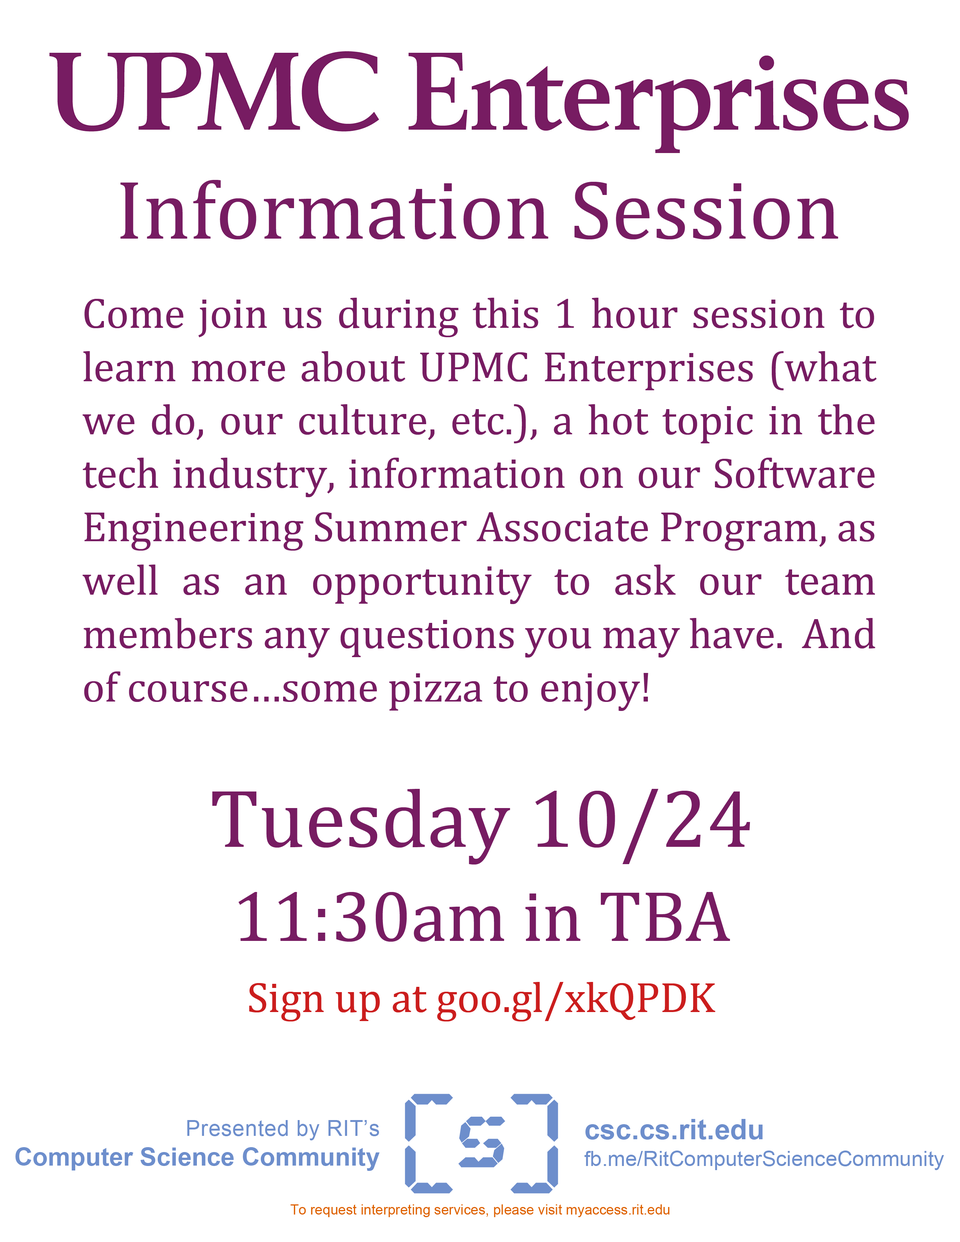
<style>
.page{position:relative;width:960px;height:1242px;background:#ffffff}
.page>*{position:absolute;margin:0}
.t1{font:84.5px "Cambria";color:#771c62}
.t2{font:42.7px/53.4px "Cambria";color:#771c62}
.t3{font:72.2px/94.1px "Cambria";color:#771c62}
.t4{font:83.1px/94.1px "Cambria";color:#771c62}
.t5{font:42.7px "Cambria";color:#cb1d1d}
.t6{font:25.1px/29.8px "Arial-BoldMT";color:#6d8ecc}
.t7{font:22px/29.8px "ArialMT";letter-spacing:0.02em;color:#6d8ecc}
.t8{font:21.2px/26.7px "ArialMT";color:#6d8ecc}
.t9{font:28.2px/26.7px "Arial-BoldMT";color:#6d8ecc}
.t10{font:13.9px "ArialMT";color:#de6100}
</style>
<div class="page">
<p class="t1" style="left:120px;top:180px;width:718px;height:59px">Information Session</p>
<p class="t2" style="left:82px;top:298px;width:795px;height:413px;text-align:justify">Come join us during this 1 hour session to learn more about UPMC Enterprises (what we do, our culture, etc.), a hot topic in the tech industry, information on our Software Engineering Summer Associate Program, as well as an opportunity to ask our team members any questions you may have.  And of course…some pizza to enjoy!</p>
<p class="t3" style="left:212px;top:789px;width:538px;height:153px;text-align:center"><span class="t4">Tuesday 10/24<br></span>11:30am in TBA</p>
<p class="t5" style="left:249px;top:982px;width:466px;height:40px">Sign up at goo.gl/xkQPDK</p>
<p class="t6" style="left:15px;top:1120px;width:365px;height:51px;text-align:right"><span class="t7">Presented by RIT’s<br></span>Computer Science Community</p>
<p class="t8" style="left:584px;top:1119px;width:360px;height:51px"><span class="t9">csc.cs.rit.edu<br></span>fb.me/RitComputerScienceCommunity</p>
<p class="t10" style="left:290px;top:1205px;width:379px;height:12px">To request interpreting services, please visit myaccess.rit.edu</p>
</div>
